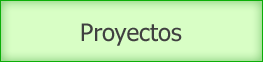
<style>
.page{position:relative;width:263px;height:62px;background:#d8fec5}
.page>*{position:absolute;margin:0}
.t1{font:24px "Tahoma";color:#404040}
</style>
<div class="page">
<p class="t1" style="left:81px;top:23px;width:101px;height:23px">Proyectos</p>
</div>
